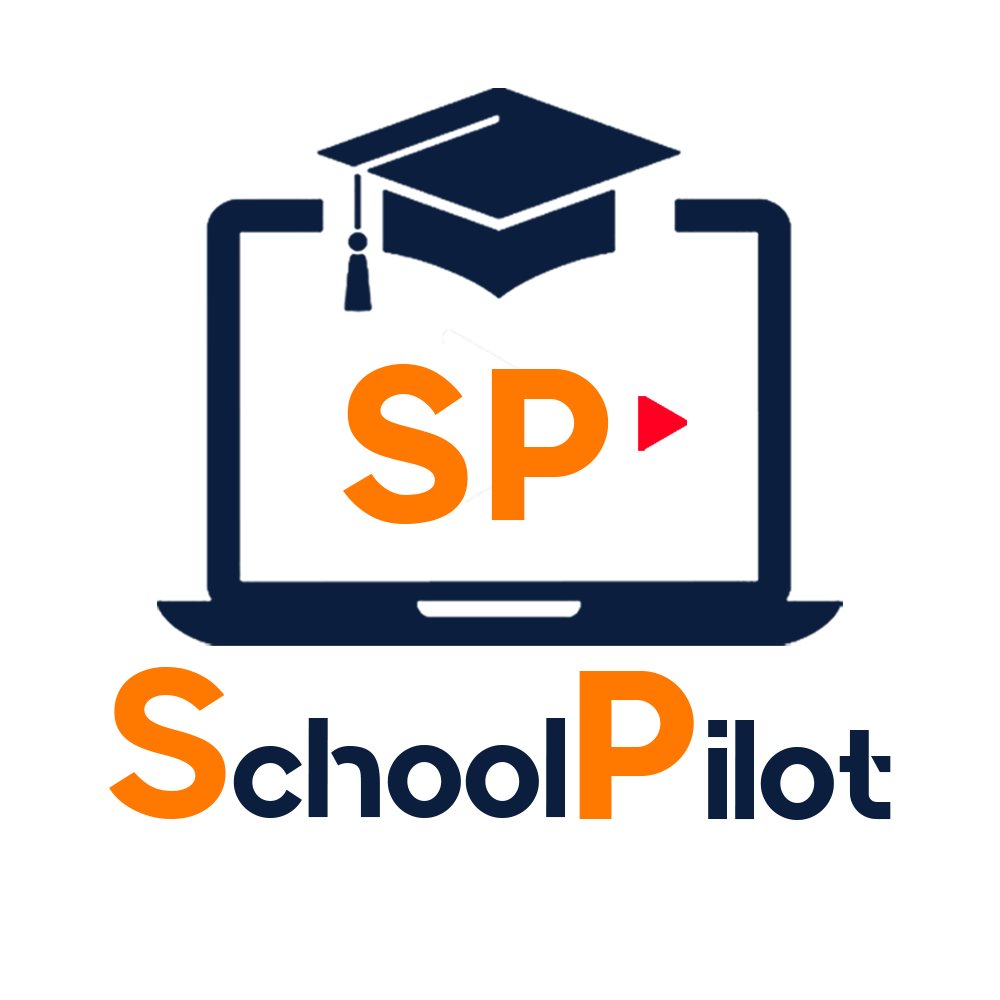
<style>
.page{position:relative;width:1000px;height:1000px;background:#ffffff}
.page>*{position:absolute;margin:0}
.t1{font:216.3px "Retroica";color:#ff7800;text-transform:uppercase}
.t2{font:141.2px "Quantify";color:#0b1e3d}
.t3{font:211.7px "Quantify";color:#ff7800}
.t4{font:211.7px "Retroica";color:#ff7800}
</style>
<div class="page">
<p class="t1" style="left:343px;top:364px;width:266px;height:160px">sp</p>
<p class="t2" style="left:109px;top:667px;width:456px;height:152px"><span class="t3">S</span>chool</p>
<p class="t2" style="left:579px;top:671px;width:312px;height:149px"><span class="t4">P</span>ilot</p>
</div>
